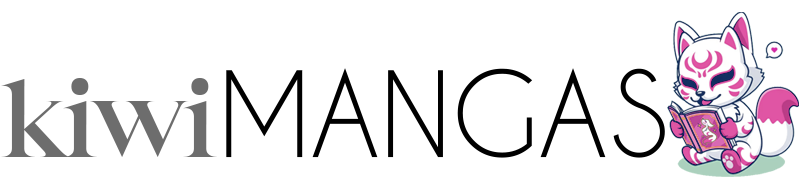
<style>
.page{position:relative;width:805px;height:188px;background:#ffffff}
.page>*{position:absolute;margin:0}
.t1{font:110.6px "CaviarDreams";color:#000000}
.t2{font:110.6px "GoldinkBrittey-Regular";color:#6d6d6d}
</style>
<div class="page">
<p class="t1" style="left:1px;top:68px;width:664px;height:90px"><span class="t2">kiwi</span>MANGAS</p>
</div>
